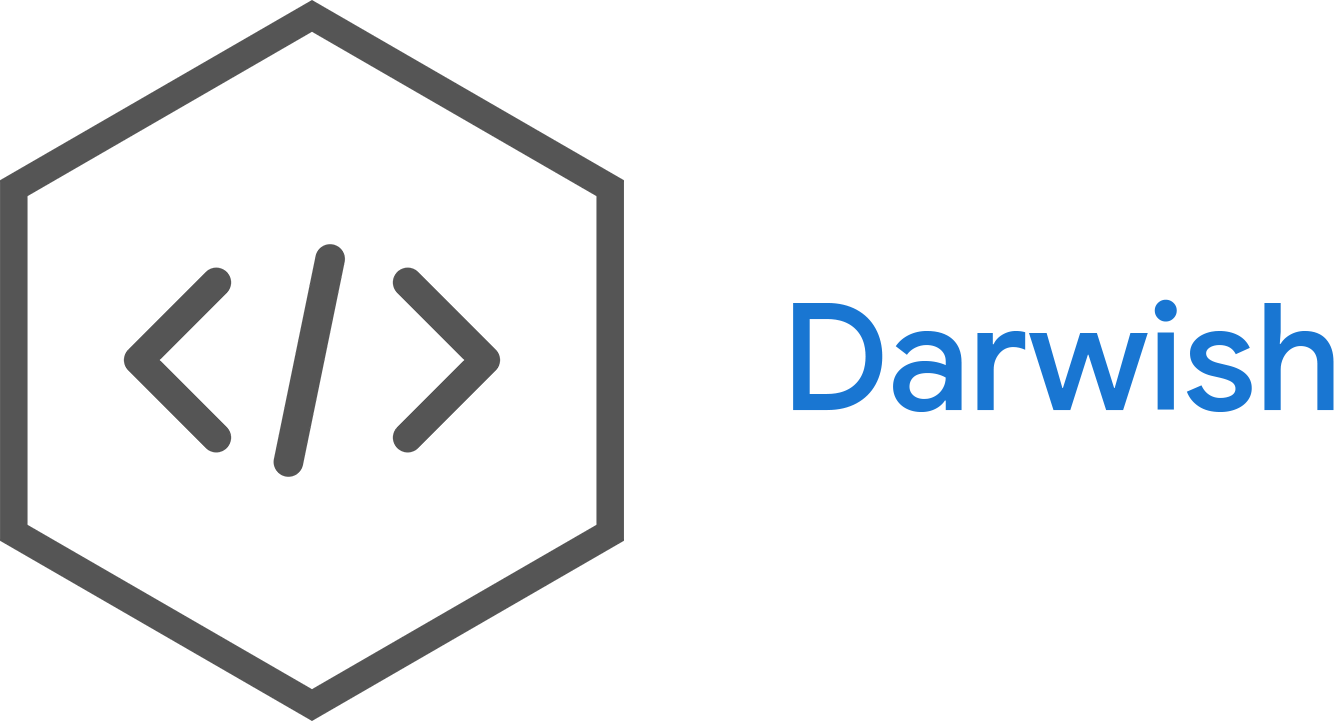
<style>
.page{position:relative;width:1341px;height:721px;background:#ffffff}
.page>*{position:absolute;margin:0}
.t1{font:150px "GoogleSans-Medium";letter-spacing:-0.01em;color:#1976d2}
</style>
<div class="page">
<p class="t1" style="left:793px;top:299px;width:541px;height:113px">Darwish</p>
</div>
